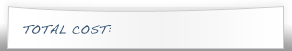
<style>
.page{position:relative;width:292px;height:51px}
.page>*{position:absolute;margin:0}
.t1{font:11.4px "Handwriting-Dakota";letter-spacing:0.05em;color:#3b5977;text-transform:uppercase}
</style>
<div class="page">
<p class="t1" style="left:23px;top:24px;width:89px;height:10px">total cost:</p>
</div>
